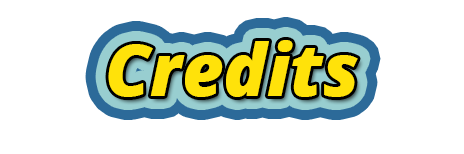
<style>
.page{position:relative;width:464px;height:154px;background:#ffffff}
.page>*{position:absolute;margin:0}
.t1{font:72px "OpenSans-ExtraboldItalic";color:#ffe20a}
</style>
<div class="page">
<p class="t1" style="left:108px;top:40px;width:250px;height:57px">Credits</p>
<p class="t1" style="left:108px;top:40px;width:250px;height:57px">Credits</p>
<p class="t1" style="left:108px;top:40px;width:250px;height:57px">Credits</p>
<p class="t1" style="left:108px;top:40px;width:250px;height:57px">Credits</p>
</div>
